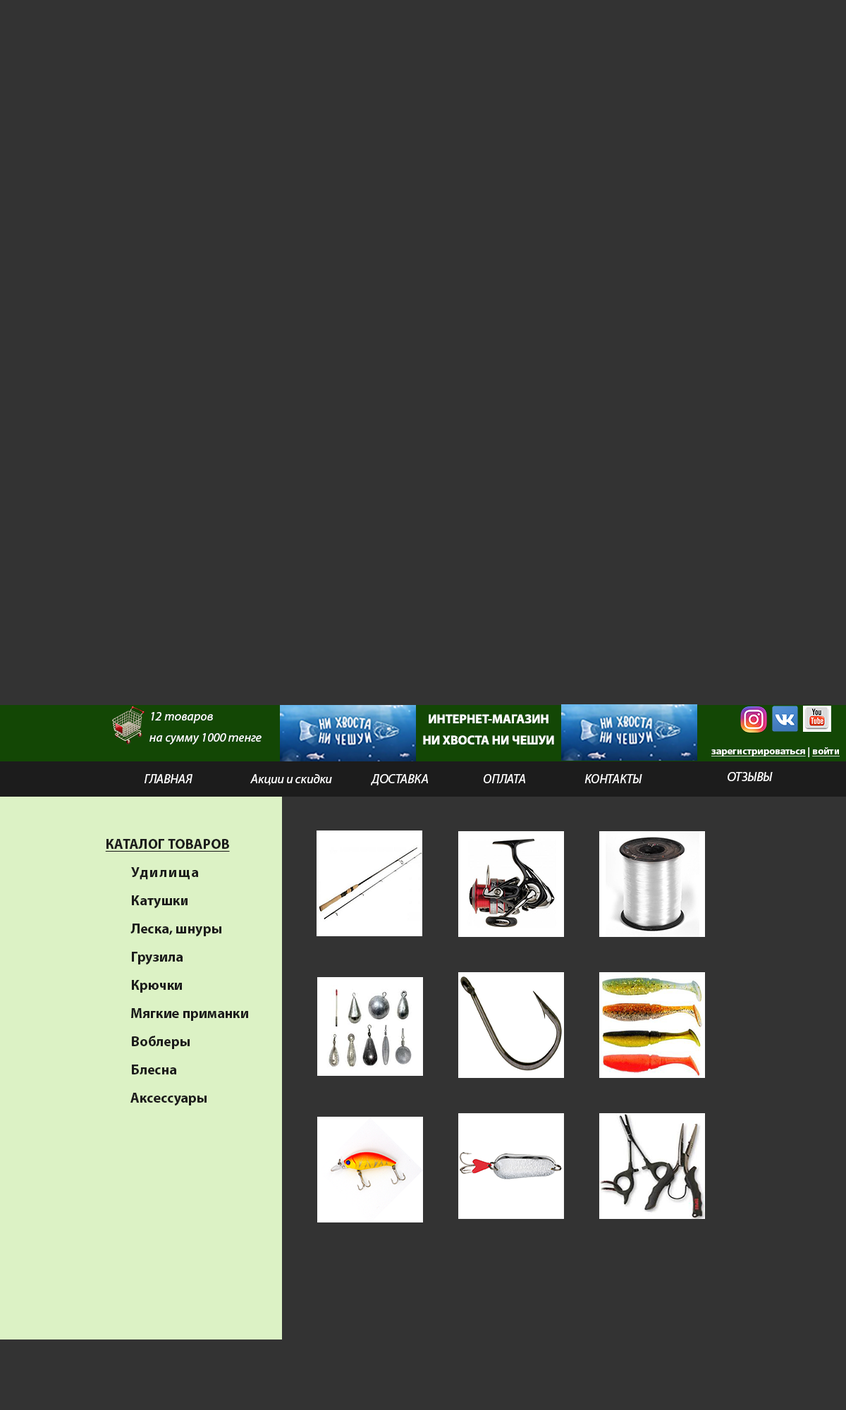
<style>
.page{position:relative;width:846px;height:1410px;background:#333333}
.page>*{position:absolute;margin:0}
.t1{font:12.7px/21.1px "MyriadPro-It";color:#ffffff}
.t2{font:12.7px/21.1px "MyriadPro-Bold";color:#ffffff}
.t3{font:9.9px "MyriadPro-Bold";color:#ffffff;text-decoration:underline}
.t4{font:9.9px "MyriadPro-Bold";color:#ffffff}
.t5{font:12.7px "MyriadPro-It";color:#ffffff}
.t6{font:14.1px "MyriadPro-Bold";color:#1c1c1c;text-transform:uppercase;text-decoration:underline}
.t7{font:14.1px "MyriadPro-Bold";letter-spacing:0.1em;color:#1c1c1c}
.t8{font:14.1px "MyriadPro-Bold";color:#1c1c1c}
</style>
<div class="page">
<p class="t1" style="left:149px;top:712px;width:113px;height:32px">12 товаров<br>на сумму 1000 тенге</p>
<p class="t2" style="left:423px;top:714px;width:131px;height:30px;text-align:center">ИНТЕРНЕТ-МАГАЗИН<br>НИ ХВОСТА НИ ЧЕШУИ</p>
<p class="t3" style="left:711px;top:747px;width:129px;height:10px">зарегистрироваться<span class="t4"> | </span>войти</p>
<p class="t5" style="left:144px;top:774px;width:48px;height:9px">ГЛАВНАЯ</p>
<p class="t5" style="left:250px;top:774px;width:82px;height:11px">Акции и скидки</p>
<p class="t5" style="left:371px;top:774px;width:57px;height:11px">ДОСТАВКА</p>
<p class="t5" style="left:484px;top:774px;width:41px;height:9px">ОПЛАТА</p>
<p class="t5" style="left:584px;top:774px;width:58px;height:9px">КОНТАКТЫ</p>
<p class="t5" style="left:727px;top:772px;width:46px;height:9px">ОТЗЫВЫ</p>
<p class="t6" style="left:105px;top:839px;width:125px;height:12px">Каталог товаров</p>
<p class="t7" style="left:131px;top:867px;width:67px;height:13px"><span class="t8">         </span>Удилища</p>
<p class="t8" style="left:132px;top:895px;width:55px;height:14px">Катушки</p>
<p class="t8" style="left:130px;top:923px;width:91px;height:14px">Леска, шнуры</p>
<p class="t8" style="left:132px;top:952px;width:51px;height:13px">Грузила</p>
<p class="t8" style="left:132px;top:980px;width:50px;height:12px">Крючки</p>
<p class="t8" style="left:131px;top:1008px;width:117px;height:13px">Мягкие приманки</p>
<p class="t8" style="left:132px;top:1035px;width:58px;height:14px">Воблеры</p>
<p class="t8" style="left:132px;top:1064px;width:44px;height:10px">Блесна</p>
<p class="t8" style="left:130px;top:1093px;width:77px;height:13px">Аксессуары</p>
</div>
